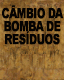
<style>
.page{position:relative;width:64px;height:80px}
.page>*{position:absolute;margin:0}
.t1{font:14px/13px "Arial-Black";letter-spacing:-0.09em;color:#050302;text-transform:uppercase;font-weight:bold;scale:0.75 1}
</style>
<div class="page">
<p class="t1" style="left:2px;top:5px;width:62px;height:40px;text-align:center">câmbio da<br>bomba de<br>resíduos</p>
</div>
